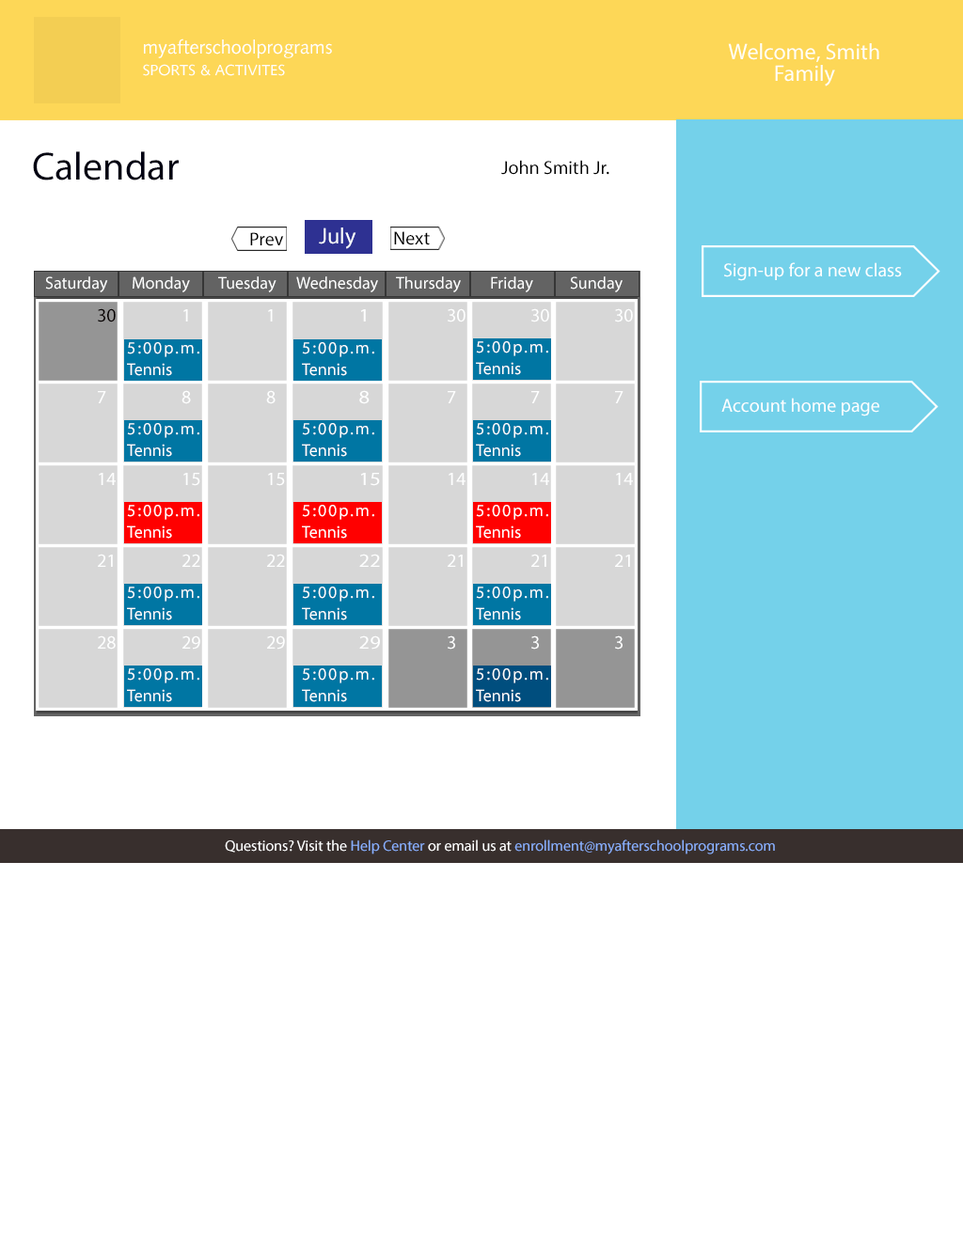
<style>
.page{position:relative;width:963px;height:1238px;background:#ffffff}
.page>*{position:absolute;margin:0}
.t1{font:18.8px/21.6px "SyntaxLTStd-Roman";color:#ffffff}
.t2{font:15px/21.6px "SyntaxLTStd-Roman";color:#ffffff}
.t3{font:22.6px/21.6px "MyriadPro-Regular";color:#fffff8}
.t4{font:39.5px "MyriadPro-Regular";color:#000012}
.t5{font:18.8px "MyriadPro-Regular";color:#000000}
.t6{font:22.6px "MyriadPro-Regular";color:#fbffff}
.t7{font:18.8px "MyriadPro-Regular";color:#feffff}
.t8{font:16.9px "MyriadPro-Regular";color:#feffff}
.t9{font:18.8px "MyriadPro-Regular";color:#050000}
.t10{font:18.8px "MyriadPro-Regular";color:#feffff;scale:1.13 1}
.t11{font:16.9px/21.6px "MyriadPro-Regular";color:#ffffff}
.t12{font:15px "MyriadPro-Regular";color:#8ab0fd}
.t13{font:15px "MyriadPro-Regular";color:#ffffff}
</style>
<div class="page">
<p class="t1" style="left:143px;top:39px;width:189px;height:37px">myafterschoolprograms<br><span class="t2">SPORTS &amp; ACTIVITES</span></p>
<p class="t3" style="left:728px;top:43px;width:151px;height:44px;text-align:center">Welcome, Smith    Family</p>
<p class="t4" style="left:33px;top:151px;width:146px;height:30px">Calendar</p>
<p class="t5" style="left:501px;top:160px;width:108px;height:15px">John Smith Jr.</p>
<p class="t5" style="left:250px;top:232px;width:34px;height:14px">Prev</p>
<p class="t6" style="left:319px;top:228px;width:37px;height:21px">July</p>
<p class="t5" style="left:394px;top:231px;width:36px;height:14px">Next</p>
<p class="t7" style="left:724px;top:262px;width:178px;height:19px">Sign-up for a new class</p>
<p class="t8" style="left:45px;top:276px;width:63px;height:16px">Saturday</p>
<p class="t8" style="left:133px;top:276px;width:57px;height:16px">Monday</p>
<p class="t8" style="left:218px;top:276px;width:58px;height:16px">Tuesday</p>
<p class="t8" style="left:296px;top:276px;width:82px;height:16px">Wednesday</p>
<p class="t8" style="left:396px;top:276px;width:65px;height:16px">Thursday</p>
<p class="t8" style="left:491px;top:276px;width:42px;height:16px">Friday</p>
<p class="t8" style="left:570px;top:276px;width:52px;height:16px">Sunday</p>
<p class="t9" style="left:98px;top:308px;width:18px;height:15px">30</p>
<p class="t7" style="left:183px;top:309px;width:5px;height:13px">1</p>
<p class="t7" style="left:268px;top:309px;width:5px;height:13px">1</p>
<p class="t10" style="left:360px;top:309px;width:6px;height:13px">1</p>
<p class="t7" style="left:448px;top:308px;width:17px;height:15px">30</p>
<p class="t7" style="left:531px;top:308px;width:18px;height:15px">30</p>
<p class="t7" style="left:615px;top:308px;width:18px;height:15px">30</p>
<p class="t11" style="left:476px;top:341px;width:72px;height:34px;text-align:justify">5:00p.m.  Tennis</p>
<p class="t11" style="left:127px;top:342px;width:72px;height:34px;text-align:justify">5:00p.m.  Tennis</p>
<p class="t11" style="left:302px;top:342px;width:72px;height:34px;text-align:justify">5:00p.m.  Tennis</p>
<p class="t7" style="left:98px;top:391px;width:8px;height:12px">7</p>
<p class="t7" style="left:181px;top:390px;width:10px;height:14px">8</p>
<p class="t7" style="left:266px;top:390px;width:10px;height:14px">8</p>
<p class="t10" style="left:359px;top:390px;width:11px;height:14px">8</p>
<p class="t7" style="left:448px;top:391px;width:8px;height:12px">7</p>
<p class="t7" style="left:531px;top:391px;width:9px;height:12px">7</p>
<p class="t7" style="left:615px;top:391px;width:8px;height:12px">7</p>
<p class="t7" style="left:721px;top:398px;width:158px;height:19px">Account home page</p>
<p class="t11" style="left:127px;top:423px;width:72px;height:34px;text-align:justify">5:00p.m.  Tennis</p>
<p class="t11" style="left:302px;top:423px;width:72px;height:34px;text-align:justify">5:00p.m.  Tennis</p>
<p class="t11" style="left:476px;top:423px;width:72px;height:34px;text-align:justify">5:00p.m.  Tennis</p>
<p class="t7" style="left:99px;top:473px;width:17px;height:12px">14</p>
<p class="t7" style="left:183px;top:473px;width:17px;height:13px">15</p>
<p class="t7" style="left:268px;top:473px;width:17px;height:13px">15</p>
<p class="t10" style="left:360px;top:473px;width:20px;height:13px">15</p>
<p class="t7" style="left:449px;top:473px;width:16px;height:12px">14</p>
<p class="t7" style="left:532px;top:473px;width:17px;height:12px">14</p>
<p class="t7" style="left:616px;top:473px;width:17px;height:12px">14</p>
<p class="t11" style="left:127px;top:505px;width:72px;height:34px;text-align:justify">5:00p.m.  Tennis</p>
<p class="t11" style="left:302px;top:505px;width:72px;height:34px;text-align:justify">5:00p.m.  Tennis</p>
<p class="t11" style="left:476px;top:505px;width:72px;height:34px;text-align:justify">5:00p.m.  Tennis</p>
<p class="t7" style="left:98px;top:554px;width:15px;height:13px">21</p>
<p class="t7" style="left:182px;top:554px;width:18px;height:13px">22</p>
<p class="t7" style="left:267px;top:554px;width:18px;height:13px">22</p>
<p class="t10" style="left:359px;top:554px;width:21px;height:13px">22</p>
<p class="t7" style="left:448px;top:554px;width:15px;height:13px">21</p>
<p class="t7" style="left:531px;top:554px;width:15px;height:13px">21</p>
<p class="t7" style="left:615px;top:554px;width:15px;height:13px">21</p>
<p class="t11" style="left:127px;top:587px;width:72px;height:34px;text-align:justify">5:00p.m.  Tennis</p>
<p class="t11" style="left:302px;top:587px;width:72px;height:34px;text-align:justify">5:00p.m.  Tennis</p>
<p class="t11" style="left:476px;top:587px;width:72px;height:34px;text-align:justify">5:00p.m.  Tennis</p>
<p class="t7" style="left:98px;top:636px;width:18px;height:14px">28</p>
<p class="t7" style="left:182px;top:636px;width:18px;height:14px">29</p>
<p class="t7" style="left:267px;top:636px;width:18px;height:14px">29</p>
<p class="t10" style="left:359px;top:636px;width:21px;height:14px">29</p>
<p class="t7" style="left:448px;top:636px;width:7px;height:14px">3</p>
<p class="t7" style="left:531px;top:636px;width:8px;height:14px">3</p>
<p class="t7" style="left:615px;top:636px;width:7px;height:14px">3</p>
<p class="t11" style="left:127px;top:669px;width:72px;height:33px;text-align:justify">5:00p.m.  Tennis</p>
<p class="t11" style="left:302px;top:669px;width:72px;height:33px;text-align:justify">5:00p.m.  Tennis</p>
<p class="t11" style="left:476px;top:669px;width:72px;height:33px;text-align:justify">5:00p.m.  Tennis</p>
<p class="t12" style="left:225px;top:840px;width:550px;height:15px"><span class="t13">Questions? Visit the </span>Help Center <span class="t13">or email us at </span>enrollment@myafterschoolprograms.com</p>
</div>
